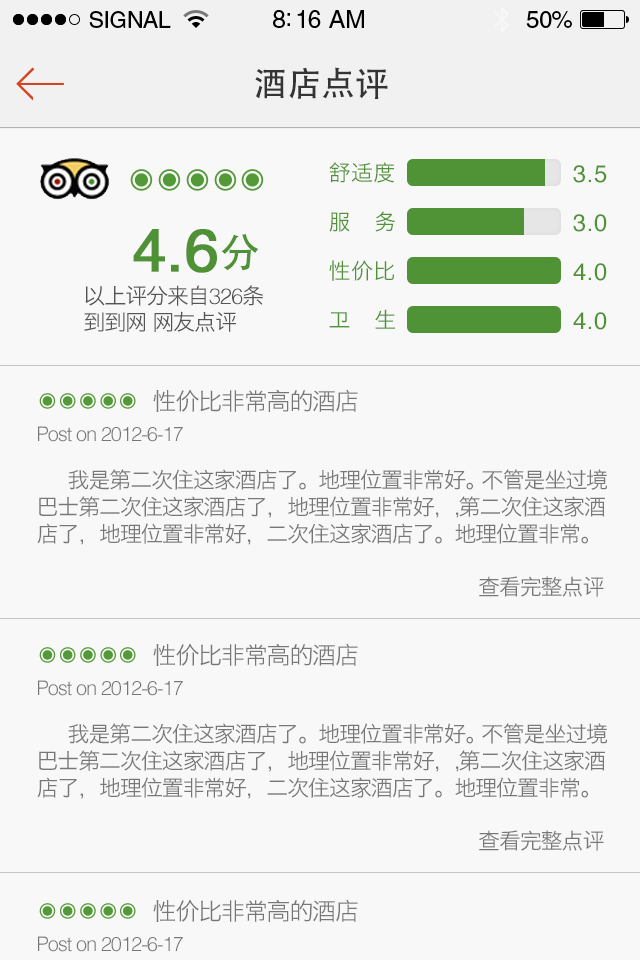
<style>
.page{position:relative;width:640px;height:960px;background:#f8f8f8}
.page>*{position:absolute;margin:0}
.t1{font:34px "STHeitiSC-Medium";color:#343434}
.t2{font:22px "HiraginoSansGB-W3";letter-spacing:0.02em;color:#509236}
.t3{font:24px "Helvetica";letter-spacing:0.02em;color:#509236}
.t4{font:60px "Helvetica";letter-spacing:-0.01em;color:#4f9235;font-weight:bold}
.t5{font:40px "STHeitiSC-Medium";letter-spacing:-0.05em;color:#4f9235}
.t6{font:22px "HiraginoSansGB-W3";letter-spacing:-0.05em;color:#555555}
.t7{font:22px "Helvetica-Light";letter-spacing:-0.05em;color:#555555}
.t8{font:24px "HiraginoSansGB-W3";letter-spacing:-0.05em;color:#777777}
.t9{font:20px "Helvetica-Light";letter-spacing:-0.05em;color:#777777}
.t10{font:22px/27.1px "HiraginoSansGB-W3";letter-spacing:-0.05em;color:#777777}
.t11{font:22px/27.1px "HiraginoSansGB-W3";letter-spacing:-0.23em;color:#777777}
.t12{font:22px "HiraginoSansGB-W3";letter-spacing:-0.05em;color:#777777}
</style>
<div class="page">
<p class="t1" style="left:255px;top:67px;width:133px;height:32px">酒店点评</p>
<p class="t2" style="left:329px;top:162px;width:65px;height:21px">舒适度</p>
<p class="t3" style="left:573px;top:165px;width:34px;height:18px">3.5</p>
<p class="t2" style="left:329px;top:211px;width:66px;height:21px">服   务</p>
<p class="t3" style="left:573px;top:214px;width:34px;height:18px">3.0</p>
<p class="t4" style="left:133px;top:229px;width:84px;height:44px">4.6</p>
<p class="t5" style="left:221px;top:234px;width:38px;height:37px">分</p>
<p class="t2" style="left:329px;top:260px;width:65px;height:21px">性价比</p>
<p class="t3" style="left:573px;top:263px;width:34px;height:18px">4.0</p>
<p class="t6" style="left:84px;top:285px;width:180px;height:47px">以上评分来自<span class="t7">326</span>条 <br>到到网 网友点评</p>
<p class="t2" style="left:329px;top:309px;width:66px;height:20px">卫   生</p>
<p class="t3" style="left:573px;top:312px;width:34px;height:18px">4.0</p>
<p class="t8" style="left:153px;top:389px;width:205px;height:23px">性价比非常高的酒店</p>
<p class="t9" style="left:38px;top:426px;width:145px;height:16px">Post on 2012-6-17</p>
<p class="t10" style="left:37px;top:469px;width:570px;height:76px">我是第二次住这家酒店了。地理位置非常好<span class="t11">。</span>不管是坐过境<br>巴士第二次住这家酒店了，地理位置非常好，,第二次住这家酒<br>店了，地理位置非常好，二次住这家酒店了。地理位置非常。</p>
<p class="t12" style="left:479px;top:576px;width:125px;height:21px">查看完整点评</p>
<p class="t8" style="left:153px;top:643px;width:205px;height:23px">性价比非常高的酒店</p>
<p class="t9" style="left:38px;top:680px;width:145px;height:16px">Post on 2012-6-17</p>
<p class="t10" style="left:37px;top:723px;width:570px;height:76px">我是第二次住这家酒店了。地理位置非常好<span class="t11">。</span>不管是坐过境<br>巴士第二次住这家酒店了，地理位置非常好，,第二次住这家酒<br>店了，地理位置非常好，二次住这家酒店了。地理位置非常。</p>
<p class="t12" style="left:479px;top:830px;width:125px;height:21px">查看完整点评</p>
<p class="t8" style="left:153px;top:899px;width:205px;height:23px">性价比非常高的酒店</p>
<p class="t9" style="left:38px;top:936px;width:145px;height:16px">Post on 2012-6-17</p>
</div>
